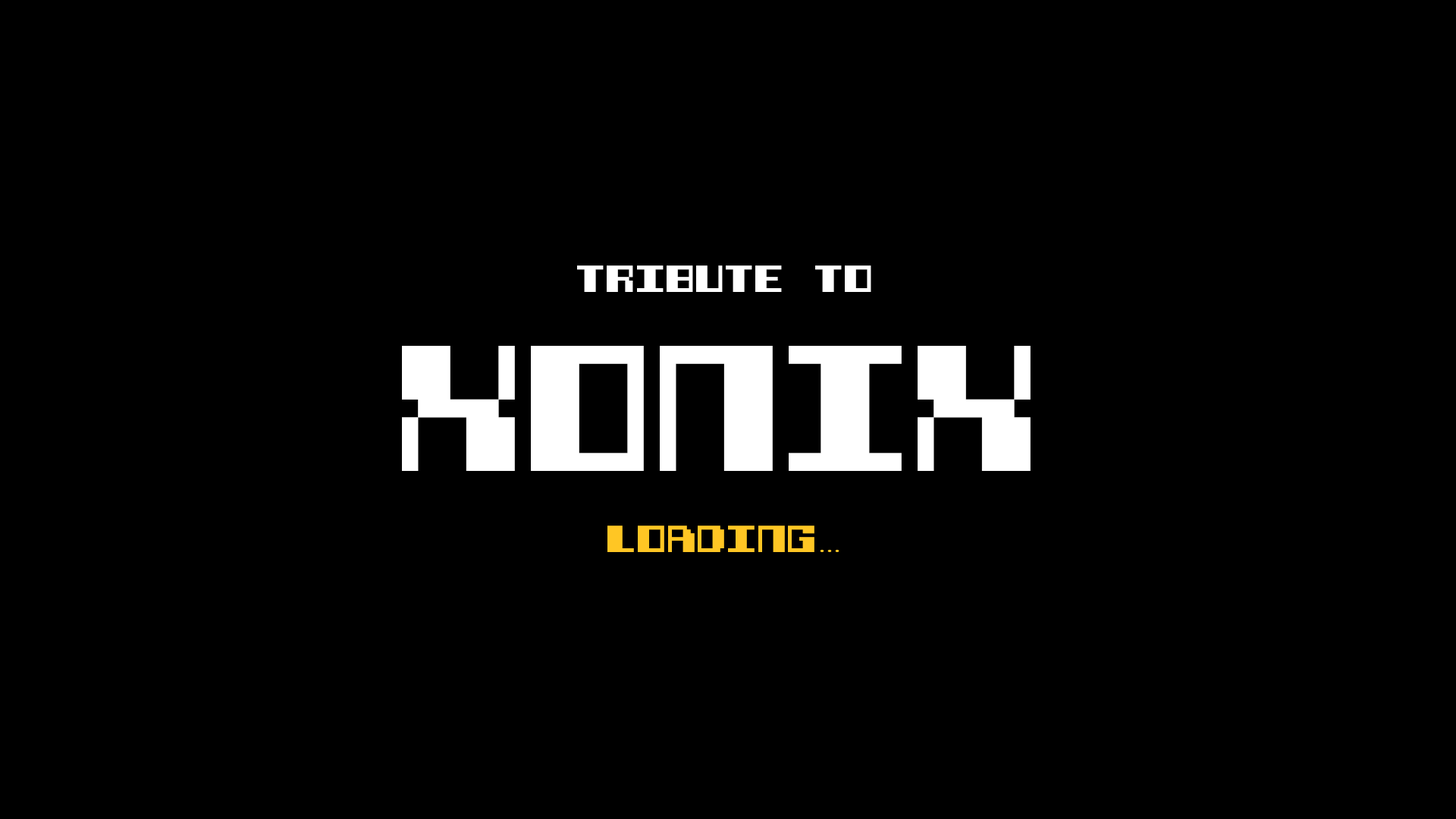
<style>
.page{position:relative;width:1456px;height:819px;background:#000000}
.page>*{position:absolute;margin:0}
.t1{font:30.1px "Qix-(large)";color:#ffffff}
.t2{font:142.9px "Qix-(large)";color:#ffffff;scale:0.9 1}
.t3{font:30.1px "Qix-(large)";color:#ffc624}
.t4{font:30.1px "TimesNewRomanPSMT";color:#ffc624}
</style>
<div class="page">
<p class="t1" style="left:577px;top:265px;width:294px;height:27px">tribute to</p>
<p class="t2" style="left:402px;top:346px;width:629px;height:125px">XONIX</p>
<p class="t3" style="left:607px;top:526px;width:232px;height:26px">loading<span class="t4">...</span></p>
</div>
